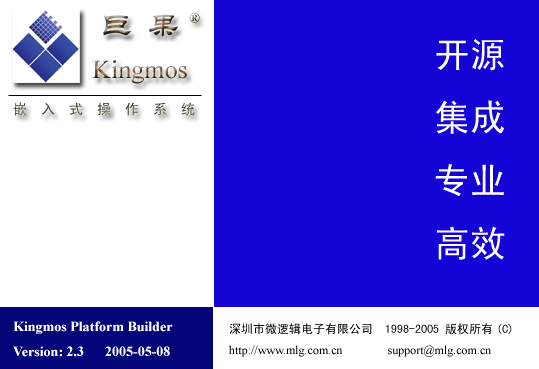
<style>
.page{position:relative;width:539px;height:369px;background:#1405d6}
.page>*{position:absolute;margin:0}
.t1{font:32px "STLiti"}
.t2{font:14px "TimesNewRomanPSMT";color:#392c25}
.t3{font:36px "SimHei";color:#ffffff}
.t4{font:26px "TimesNewRomanPSMT"}
.t5{font:14px "SimHei"}
.t6{font:14px "TimesNewRomanPS-BoldMT";color:#ffffff}
.t7{font:12px "TimesNewRomanPSMT";color:#000000}
.t8{font:12px "SimHei";color:#000000}
</style>
<div class="page">
<p class="t1" style="left:103px;top:14px;width:75px;height:23px">巨  果</p>
<p class="t2" style="left:189px;top:13px;width:11px;height:10px">®</p>
<p class="t3" style="left:435px;top:39px;width:70px;height:221px">开源<br>集成<br>专业<br>高效</p>
<p class="t4" style="left:92px;top:60px;width:95px;height:24px">Kingmos</p>
<p class="t5" style="left:13px;top:102px;width:182px;height:14px">嵌  入  式  操  作  系  统</p>
<p class="t6" style="left:13px;top:321px;width:160px;height:36px">Kingmos Platform Builder<br>Version: 2.3      2005-05-08</p>
<p class="t7" style="left:229px;top:323px;width:283px;height:34px"><span class="t8">深圳市微逻辑电子有限公司  1998-2005 版权所有(C)<br></span>http://www.mlg.com.cn               support@mlg.com.cn</p>
</div>
